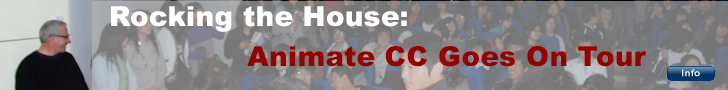
<style>
.page{position:relative;width:728px;height:90px}
.page>*{position:absolute;margin:0}
.t1{font:27.8px "Arial-Black";letter-spacing:0.01em;color:#ffffff}
.t2{font:27.8px "Arial-Black";letter-spacing:0.01em;color:#950000}
</style>
<div class="page">
<p class="t1" style="left:111px;top:6px;width:296px;height:26px">Rocking the House:</p>
<p class="t2" style="left:247px;top:46px;width:400px;height:21px">Animate CC Goes On Tour</p>
</div>
